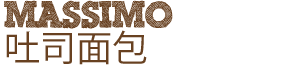
<style>
.page{position:relative;width:289px;height:65px;background:#ffffff}
.page>*{position:absolute;margin:0}
.t1{font:36px/33px "ScribbleBoxDEMO";color:#684121}
.t2{font:36px/33px "KozGoPr6N-Regular";color:#684121}
</style>
<div class="page">
<p class="t1" style="left:4px;top:0px;width:169px;height:65px">Massimo<br><span class="t2">吐司面包</span></p>
</div>
